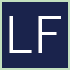
<style>
.page{position:relative;width:70px;height:70px;background:#1a234c}
.page>*{position:absolute;margin:0}
.t1{font:50px "YuGothic-Regular";color:#ffffff}
</style>
<div class="page">
<p class="t1" style="left:9px;top:16px;width:52px;height:37px">LF</p>
</div>
